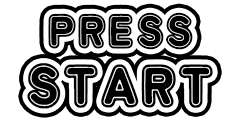
<style>
.page{position:relative;width:240px;height:120px;background:#ffffff}
.page>*{position:absolute;margin:0}
.t1{font:48px/48px "DokiDokiFantasia";letter-spacing:0.02em;color:#000000}
.t2{font:60px/48px "DokiDokiFantasia";letter-spacing:0.02em;color:#000000}
</style>
<div class="page">
<p class="t1" style="left:27px;top:12px;width:186px;height:97px;text-align:center">PRESS<br><span class="t2">START</span></p>
</div>
